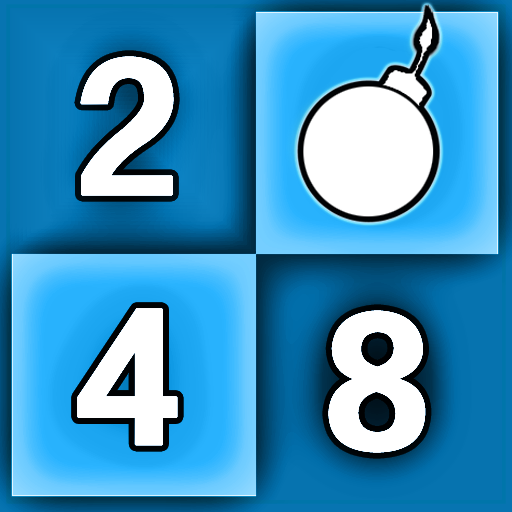
<style>
.page{position:relative;width:512px;height:512px}
.page>*{position:absolute;margin:0}
.t1{font:159.8px "FZZDHJW--GB1-0";color:#ffffff;font-weight:bold;scale:0.9 1}
</style>
<div class="page">
<p class="t1" style="left:80px;top:56px;width:94px;height:140px">2</p>
<p class="t1" style="left:77px;top:308px;width:101px;height:138px">4</p>
<p class="t1" style="left:328px;top:310px;width:98px;height:143px">8</p>
</div>
